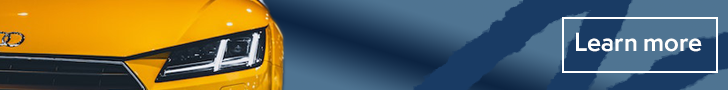
<style>
.page{position:relative;width:728px;height:90px}
.page>*{position:absolute;margin:0}
.t1{font:24px "SemplicitaPro-Semibold";color:#fefefe}
</style>
<div class="page">
<p class="t1" style="left:576px;top:32px;width:126px;height:20px">Learn more</p>
</div>
